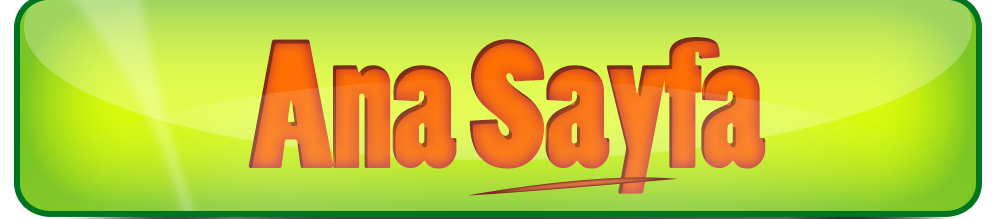
<style>
.page{position:relative;width:1000px;height:219px}
.page>*{position:absolute;margin:0}
.t1{font:171px "PoplarStd";letter-spacing:-0.02em}
</style>
<div class="page">
<p class="t1" style="left:248px;top:37px;width:518px;height:157px">Ana Sayfa</p>
</div>
